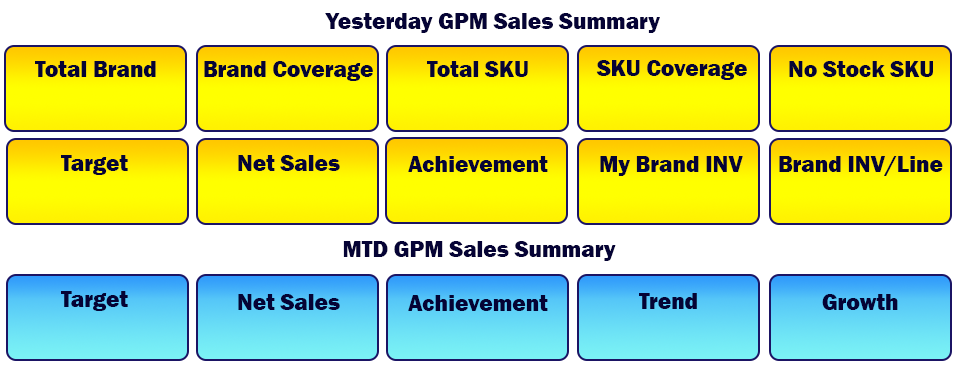
<style>
.page{position:relative;width:960px;height:374px;background:#ffffff}
.page>*{position:absolute;margin:0}
.t1{font:22.9px "FranklinGothic-Heavy";color:#050335}
</style>
<div class="page">
<p class="t1" style="left:325px;top:13px;width:335px;height:20px">Yesterday GPM Sales Summary</p>
<p class="t1" style="left:35px;top:61px;width:121px;height:16px">Total Brand</p>
<p class="t1" style="left:204px;top:61px;width:169px;height:20px">Brand Coverage</p>
<p class="t1" style="left:427px;top:61px;width:101px;height:16px">Total SKU</p>
<p class="t1" style="left:596px;top:60px;width:151px;height:20px">SKU Coverage</p>
<p class="t1" style="left:789px;top:61px;width:144px;height:16px">No Stock SKU</p>
<p class="t1" style="left:61px;top:155px;width:67px;height:20px">Target</p>
<p class="t1" style="left:238px;top:155px;width:102px;height:16px">Net Sales</p>
<p class="t1" style="left:408px;top:156px;width:140px;height:16px">Achievement</p>
<p class="t1" style="left:600px;top:156px;width:143px;height:20px">My Brand INV</p>
<p class="t1" style="left:779px;top:156px;width:164px;height:20px">Brand INV/Line</p>
<p class="t1" style="left:343px;top:241px;width:273px;height:20px">MTD GPM Sales Summary</p>
<p class="t1" style="left:61px;top:291px;width:67px;height:20px">Target</p>
<p class="t1" style="left:238px;top:294px;width:102px;height:16px">Net Sales</p>
<p class="t1" style="left:639px;top:293px;width:58px;height:16px">Trend</p>
<p class="t1" style="left:822px;top:294px;width:76px;height:16px">Growth</p>
<p class="t1" style="left:408px;top:295px;width:140px;height:16px">Achievement</p>
</div>
